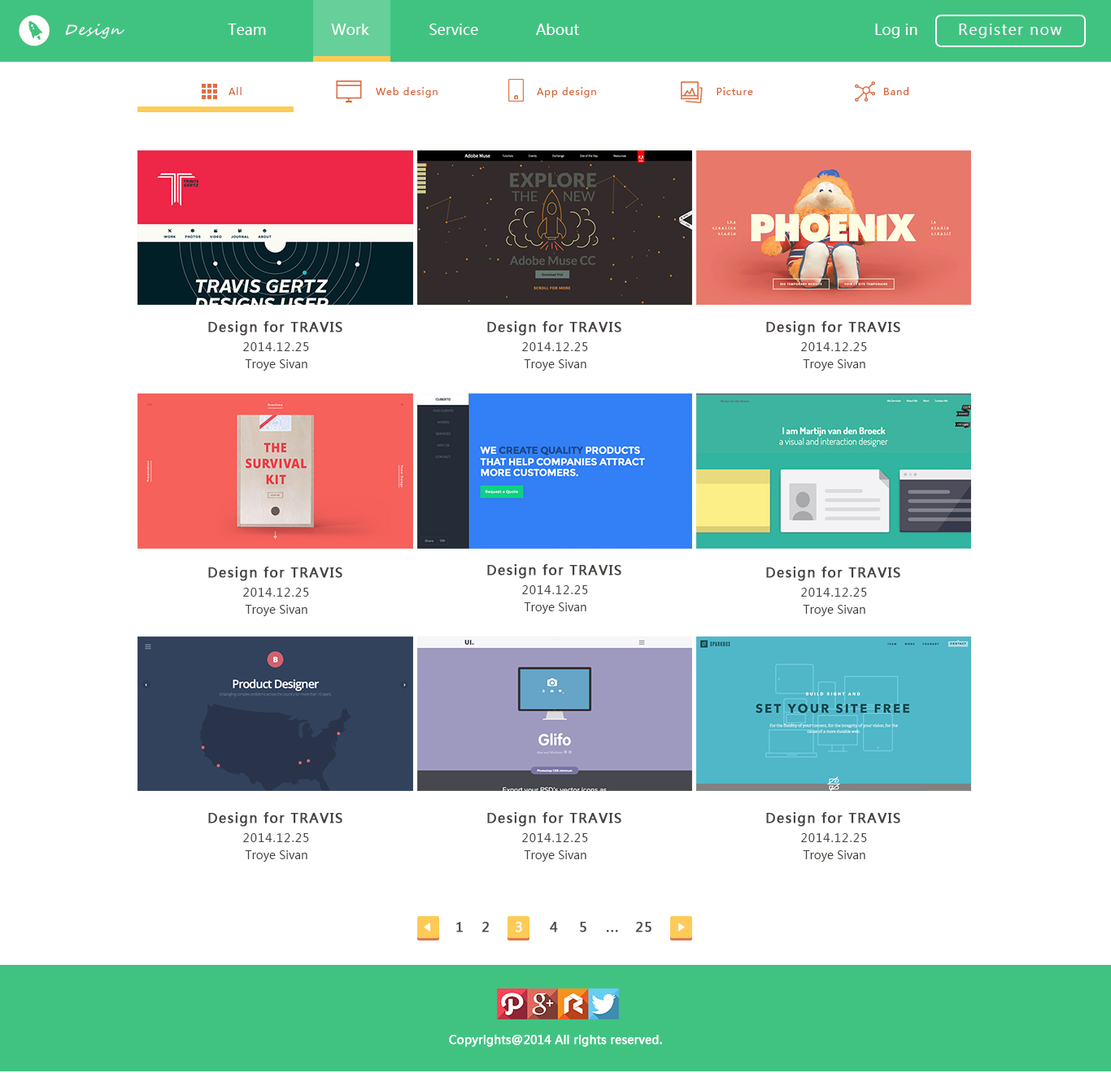
<style>
.page{position:relative;width:1111px;height:1073px;background:#ffffff}
.page>*{position:absolute;margin:0}
.t1{font:14.6px "SegoeScript";letter-spacing:0.075em;color:#fff4ff;font-style:italic}
.t2{font:14.6px "MicrosoftYaHei";color:#ffffff}
.t3{font:14.6px "MicrosoftYaHei";letter-spacing:0.075em;color:#fff4ff}
.t4{font:9.8px "MicrosoftYaHei";letter-spacing:0.075em;color:#d96234}
.t5{font:13px "MicrosoftYaHei";letter-spacing:0.075em;color:#45413f;font-weight:bold}
.t6{font:11.4px "MicrosoftYaHei";letter-spacing:0.075em;color:#45413f}
.t7{font:11.4px "MicrosoftYaHei";color:#43413c}
.t8{font:13px "MicrosoftYaHei";letter-spacing:0.075em;color:#47484d;font-weight:bold}
.t9{font:13px "MicrosoftYaHei";letter-spacing:0.075em;color:#ffffff;font-weight:bold}
.t10{font:11.4px "MicrosoftYaHei";color:#ffffff;font-weight:bold}
</style>
<div class="page">
<p class="t1" style="left:65px;top:24px;width:59px;height:15px">Design</p>
<p class="t2" style="left:228px;top:24px;width:38px;height:11px">Team</p>
<p class="t2" style="left:331px;top:24px;width:38px;height:11px">Work</p>
<p class="t2" style="left:429px;top:24px;width:49px;height:11px">Service</p>
<p class="t2" style="left:536px;top:24px;width:43px;height:11px">About</p>
<p class="t2" style="left:875px;top:24px;width:42px;height:14px">Log in</p>
<p class="t3" style="left:959px;top:24px;width:103px;height:14px">Register now</p>
<p class="t4" style="left:229px;top:87px;width:13px;height:8px">All</p>
<p class="t4" style="left:376px;top:87px;width:62px;height:11px">Web design</p>
<p class="t4" style="left:537px;top:87px;width:59px;height:11px">App design</p>
<p class="t4" style="left:716px;top:87px;width:37px;height:8px">Picture</p>
<p class="t4" style="left:884px;top:87px;width:24px;height:8px">Band</p>
<p class="t5" style="left:208px;top:321px;width:134px;height:15px">Design for TRAVIS</p>
<p class="t5" style="left:487px;top:321px;width:134px;height:15px">Design for TRAVIS</p>
<p class="t5" style="left:766px;top:321px;width:134px;height:15px">Design for TRAVIS</p>
<p class="t6" style="left:243px;top:342px;width:66px;height:9px">2014.12.25</p>
<p class="t6" style="left:522px;top:342px;width:66px;height:9px">2014.12.25</p>
<p class="t6" style="left:801px;top:342px;width:66px;height:9px">2014.12.25</p>
<p class="t7" style="left:245px;top:359px;width:62px;height:12px">Troye Sivan</p>
<p class="t7" style="left:524px;top:359px;width:62px;height:12px">Troye Sivan</p>
<p class="t7" style="left:803px;top:359px;width:62px;height:12px">Troye Sivan</p>
<p class="t5" style="left:208px;top:567px;width:134px;height:14px">Design for TRAVIS</p>
<p class="t5" style="left:487px;top:564px;width:134px;height:15px">Design for TRAVIS</p>
<p class="t5" style="left:766px;top:567px;width:134px;height:14px">Design for TRAVIS</p>
<p class="t6" style="left:243px;top:588px;width:66px;height:9px">2014.12.25</p>
<p class="t6" style="left:522px;top:586px;width:66px;height:8px">2014.12.25</p>
<p class="t6" style="left:801px;top:588px;width:66px;height:9px">2014.12.25</p>
<p class="t7" style="left:245px;top:605px;width:62px;height:11px">Troye Sivan</p>
<p class="t7" style="left:524px;top:603px;width:62px;height:11px">Troye Sivan</p>
<p class="t7" style="left:803px;top:605px;width:62px;height:11px">Troye Sivan</p>
<p class="t5" style="left:208px;top:812px;width:134px;height:15px">Design for TRAVIS</p>
<p class="t5" style="left:487px;top:812px;width:134px;height:15px">Design for TRAVIS</p>
<p class="t5" style="left:766px;top:812px;width:134px;height:15px">Design for TRAVIS</p>
<p class="t6" style="left:243px;top:834px;width:66px;height:8px">2014.12.25</p>
<p class="t6" style="left:522px;top:834px;width:66px;height:8px">2014.12.25</p>
<p class="t6" style="left:801px;top:834px;width:66px;height:8px">2014.12.25</p>
<p class="t7" style="left:245px;top:851px;width:62px;height:11px">Troye Sivan</p>
<p class="t7" style="left:524px;top:851px;width:62px;height:11px">Troye Sivan</p>
<p class="t7" style="left:803px;top:851px;width:62px;height:11px">Troye Sivan</p>
<p class="t8" style="left:456px;top:922px;width:7px;height:11px">1</p>
<p class="t8" style="left:481px;top:922px;width:8px;height:11px">2</p>
<p class="t9" style="left:516px;top:922px;width:6px;height:11px">3</p>
<p class="t8" style="left:550px;top:922px;width:8px;height:11px">4</p>
<p class="t8" style="left:580px;top:922px;width:6px;height:11px">5</p>
<p class="t8" style="left:635px;top:922px;width:16px;height:11px">25</p>
<p class="t8" style="left:606px;top:930px;width:12px;height:3px">...</p>
<p class="t10" style="left:449px;top:1035px;width:213px;height:12px">Copyrights@2014 All rights reserved.</p>
</div>
